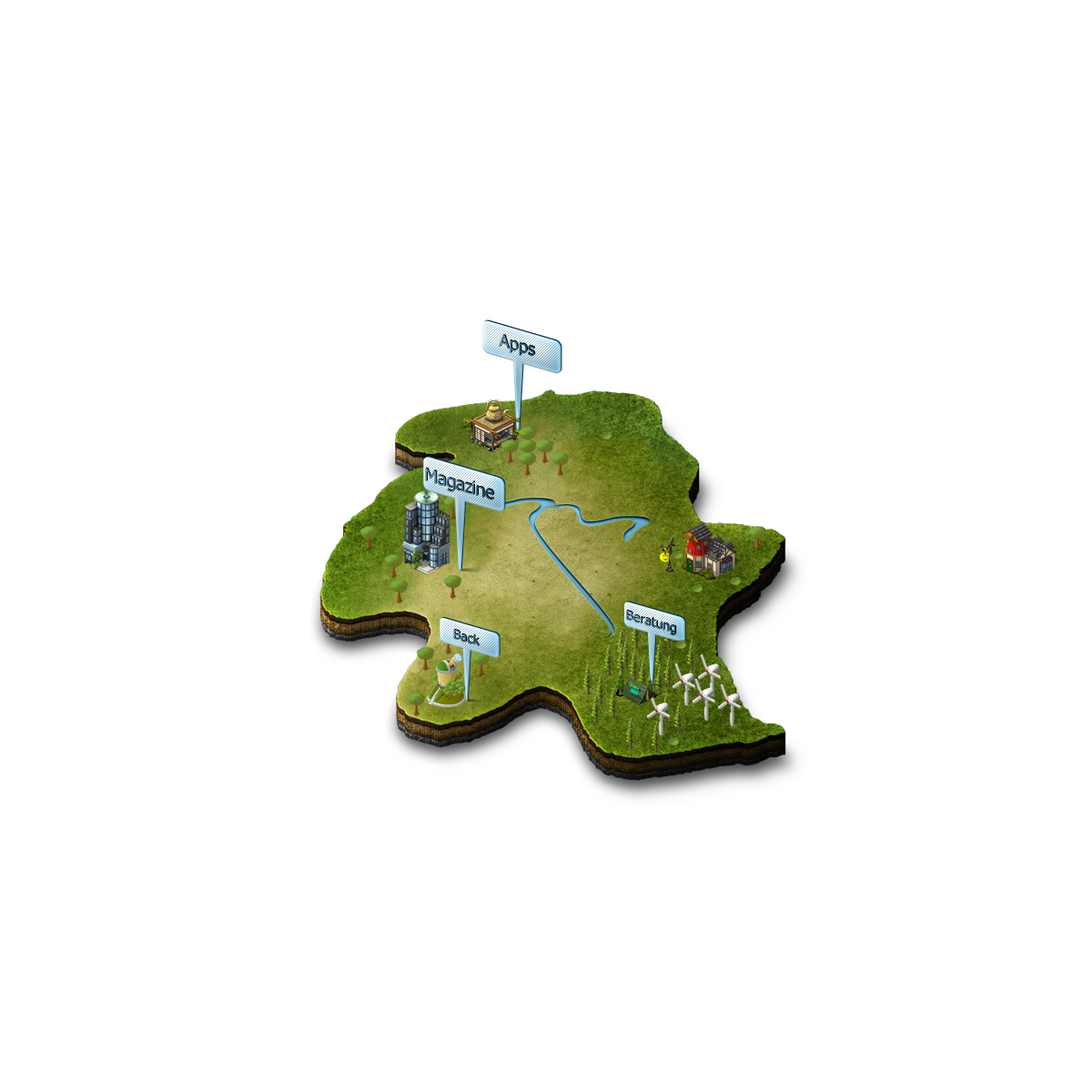
<style>
.page{position:relative;width:1092px;height:1092px;background:#ffffff}
.page>*{position:absolute;margin:0}
.t1{font:17.1px "Tahoma";scale:1.04 1}
.t2{font:17.6px "Tahoma";scale:1.04 1}
.t3{font:13px "Tahoma";scale:1.06 1}
.t4{font:12.9px "Tahoma";color:#477c98;scale:1.04 1}
</style>
<div class="page">
<p class="t1" style="left:499px;top:335px;width:36px;height:22px;rotate:16deg">Apps</p>
<p class="t2" style="left:425px;top:468px;width:69px;height:32px;rotate:16deg">Magazine</p>
<p class="t3" style="left:626px;top:610px;width:50px;height:26px;rotate:16deg">Beratung</p>
<p class="t4" style="left:453px;top:629px;width:27px;height:17px;rotate:16deg">Back</p>
</div>
